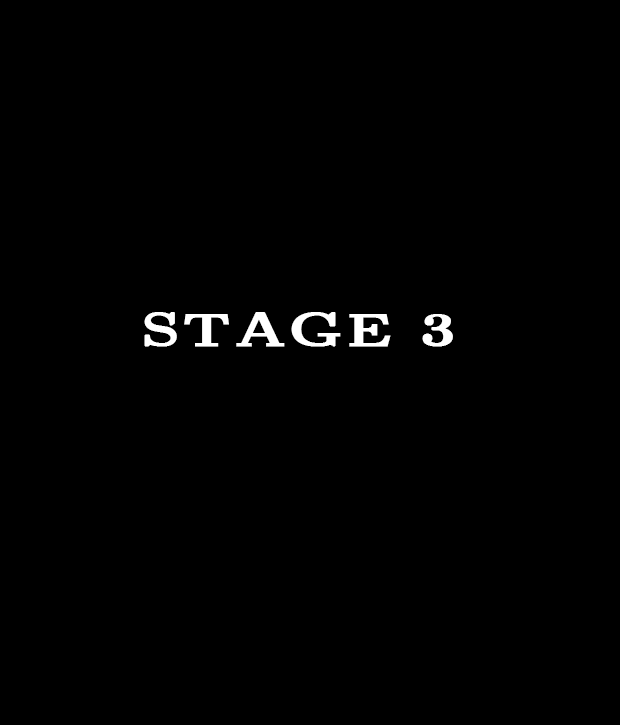
<style>
.page{position:relative;width:620px;height:725px;background:#000000}
.page>*{position:absolute;margin:0}
.t1{font:48px "Cmbx5";color:#ffffff;font-weight:bold}
</style>
<div class="page">
<p class="t1" style="left:144px;top:312px;width:309px;height:35px">STAGE 3</p>
</div>
